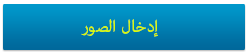
<style>
.page{position:relative;width:248px;height:53px}
.page>*{position:absolute;margin:0}
.t1{font:24px "AdobeArabic-Regular";color:#dafa05}
</style>
<div class="page">
<p class="t1" style="left:81px;top:19px;width:77px;height:18px">إدخال الصور</p>
</div>
